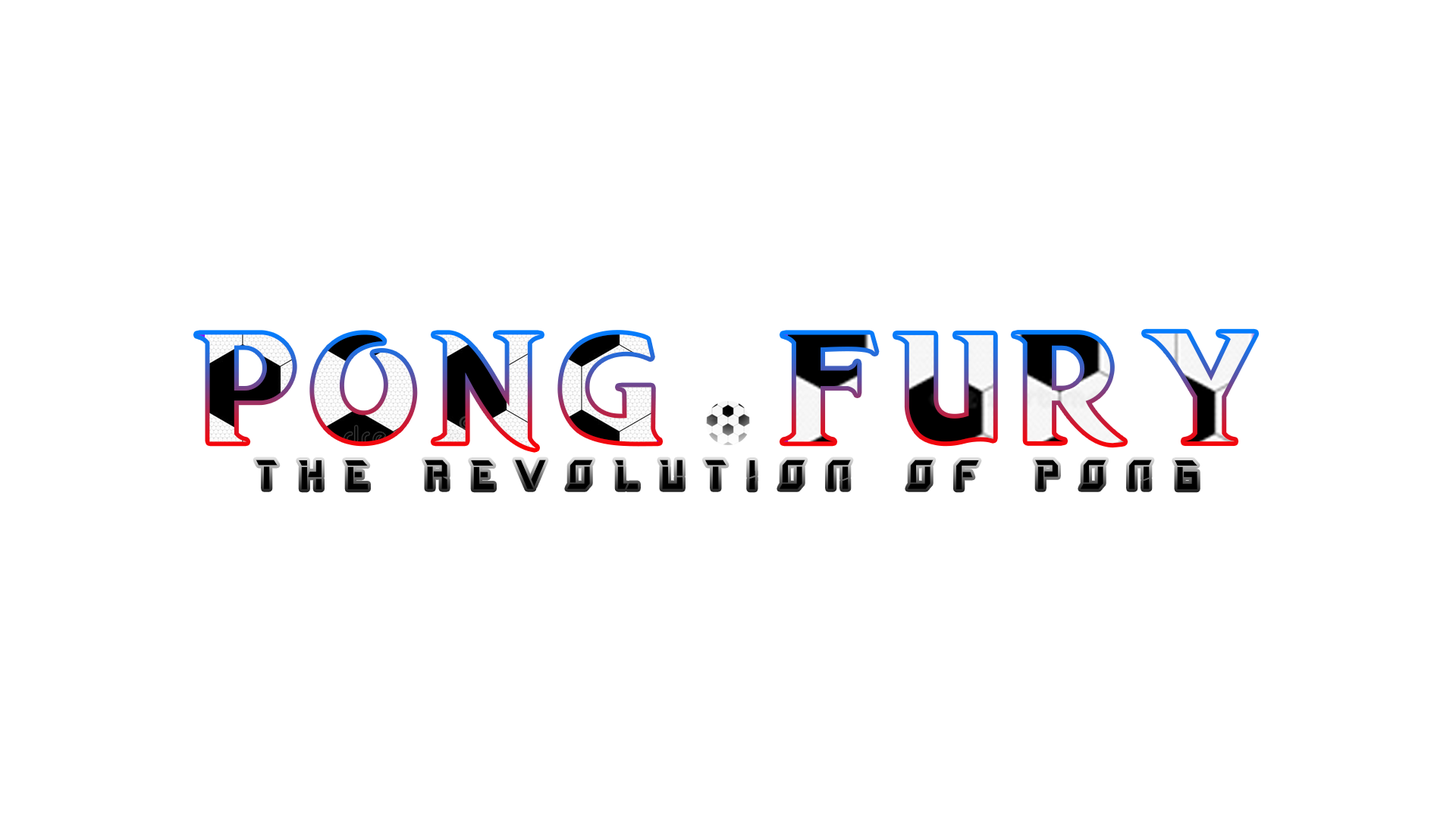
<style>
.page{position:relative;width:1456px;height:819px;background:#ffffff}
.page>*{position:absolute;margin:0}
.t1{font:145.9px "DRAGONHUNTER";letter-spacing:0.2em}
.t2{font:41.5px "PlaguardRegular";letter-spacing:0.5em;color:#000000}
</style>
<div class="page">
<p class="t1" style="left:197px;top:333px;width:1058px;height:115px">Pong FuRy</p>
<p class="t2" style="left:256px;top:460px;width:941px;height:30px">The Revolution of pong</p>
</div>
